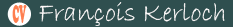
<style>
.page{position:relative;width:233px;height:27px;background:#2f4f4f}
.page>*{position:absolute;margin:0}
.t1{font:27px "CooperBlack";color:#ff7f50;scale:0.33 1}
.t2{font:27px "BradleyHandITC";color:#fffafa}
</style>
<div class="page">
<p class="t1" style="left:12px;top:5px;width:15px;height:18px">CV</p>
<p class="t2" style="left:39px;top:2px;width:186px;height:24px">François Kerloch</p>
</div>
